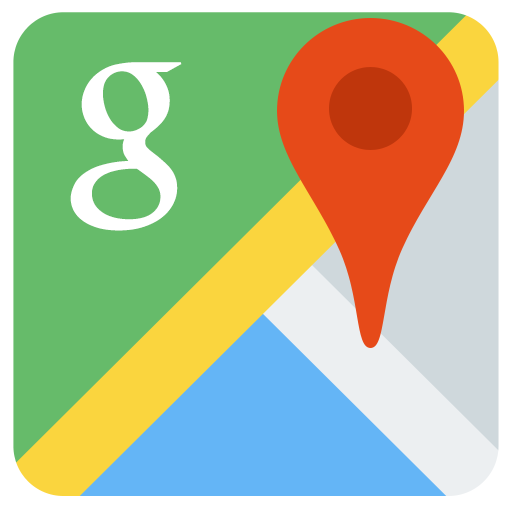
<style>
.page{position:relative;width:512px;height:512px;background:#66bb6a}
.page>*{position:absolute;margin:0}
.t1{font:218.3px "Catull-Regular";letter-spacing:0.04em;color:#ffffff;font-weight:bold}
</style>
<div class="page">
<p class="t1" style="left:70px;top:62px;width:112px;height:169px">g</p>
</div>
